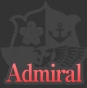
<style>
.page{position:relative;width:87px;height:88px;background:#333333}
.page>*{position:absolute;margin:0}
.t1{font:24px "RyuminPro-ExBold";letter-spacing:-0.08em;color:#ff575c;scale:0.9 1}
</style>
<div class="page">
<p class="t1" style="left:6px;top:63px;width:76px;height:19px">Admiral</p>
</div>
